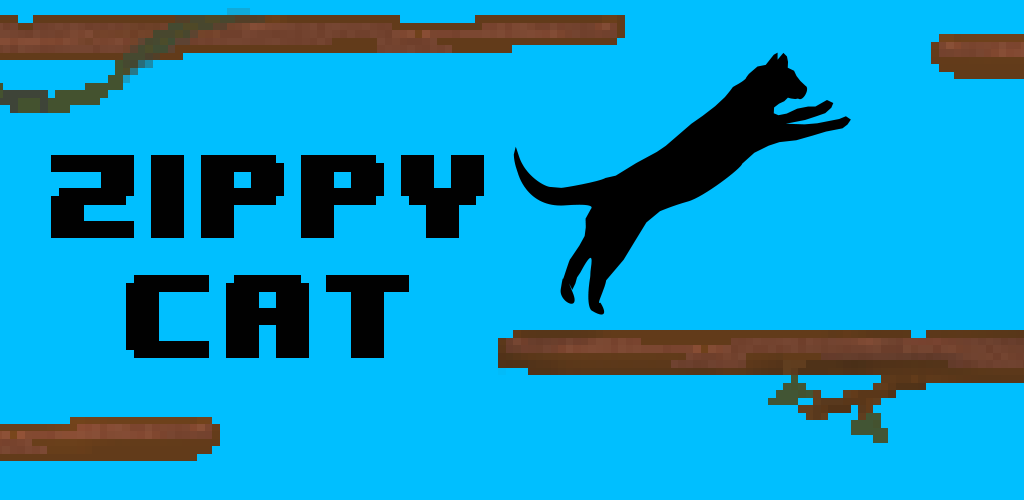
<style>
.page{position:relative;width:1024px;height:500px;background:#00bfff}
.page>*{position:absolute;margin:0}
.t1{font:100px "8BITWONDERNominal";color:#010101}
</style>
<div class="page">
<p class="t1" style="left:51px;top:155px;width:433px;height:203px;text-align:center">ZIPPY<br>CAT</p>
</div>
